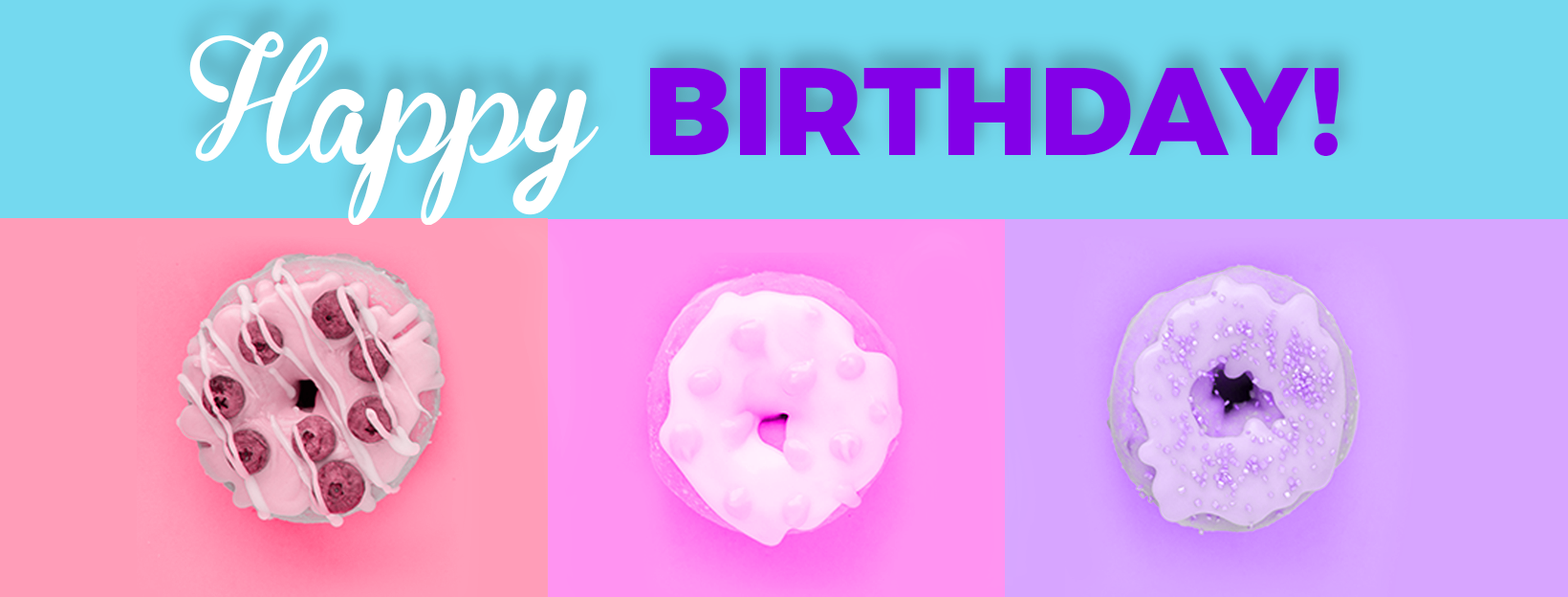
<style>
.page{position:relative;width:1568px;height:597px}
.page>*{position:absolute;margin:0}
.t1{font:124.3px "BrannbollFet";color:#ffffff}
.t2{font:124.3px "Montserrat-ExtraBold";color:#8300e8;text-transform:uppercase}
</style>
<div class="page">
<p class="t1" style="left:189px;top:31px;width:410px;height:194px">Happy</p>
<p class="t2" style="left:650px;top:68px;width:689px;height:88px">Birthday!</p>
</div>
